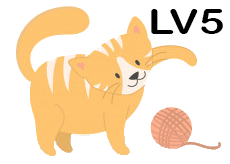
<style>
.page{position:relative;width:230px;height:164px;background:#ffffff}
.page>*{position:absolute;margin:0}
.t1{font:35.4px "ArialRoundedMTBold";color:#000000;scale:1.21 1}
</style>
<div class="page">
<p class="t1" style="left:151px;top:9px;width:72px;height:25px">LV5</p>
</div>
